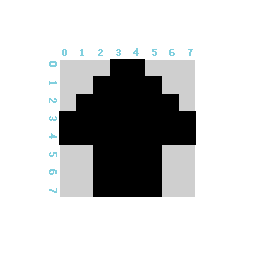
<style>
.page{position:relative;width:256px;height:256px;background:#ffffff}
.page>*{position:absolute;margin:0}
.t1{font:11.4px "YouYuan";letter-spacing:-0.26em;color:#80cfde;font-weight:bold}
.t2{font:11.5px "YouYuan";letter-spacing:-0.26em;color:#80cfde;font-weight:bold}
</style>
<div class="page">
<p class="t1" style="left:62px;top:48px;width:131px;height:8px">0   1   2   3   4   5   6   7</p>
<p class="t2" style="left:49px;top:61px;width:8px;height:132px;rotate:90deg">0   1   2   3   4   5   6   7</p>
</div>
